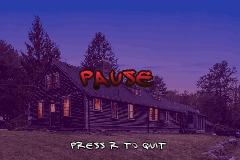
<style>
.page{position:relative;width:240px;height:160px}
.page>*{position:absolute;margin:0}
.t1{font:21px "DJ-Gross"}
.t2{font:9px "DJ-Gross";color:#ffffff}
</style>
<div class="page">
<p class="t1" style="left:80px;top:70px;width:73px;height:19px">Pause</p>
<p class="t2" style="left:70px;top:141px;width:97px;height:9px">press R to Quit</p>
</div>
